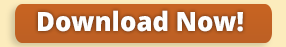
<style>
.page{position:relative;width:286px;height:47px}
.page>*{position:absolute;margin:0}
.t1{font:26.4px "OpenSans-Extrabold";color:#fefdfd}
</style>
<div class="page">
<p class="t1" style="left:38px;top:10px;width:205px;height:22px">Download Now!</p>
</div>
